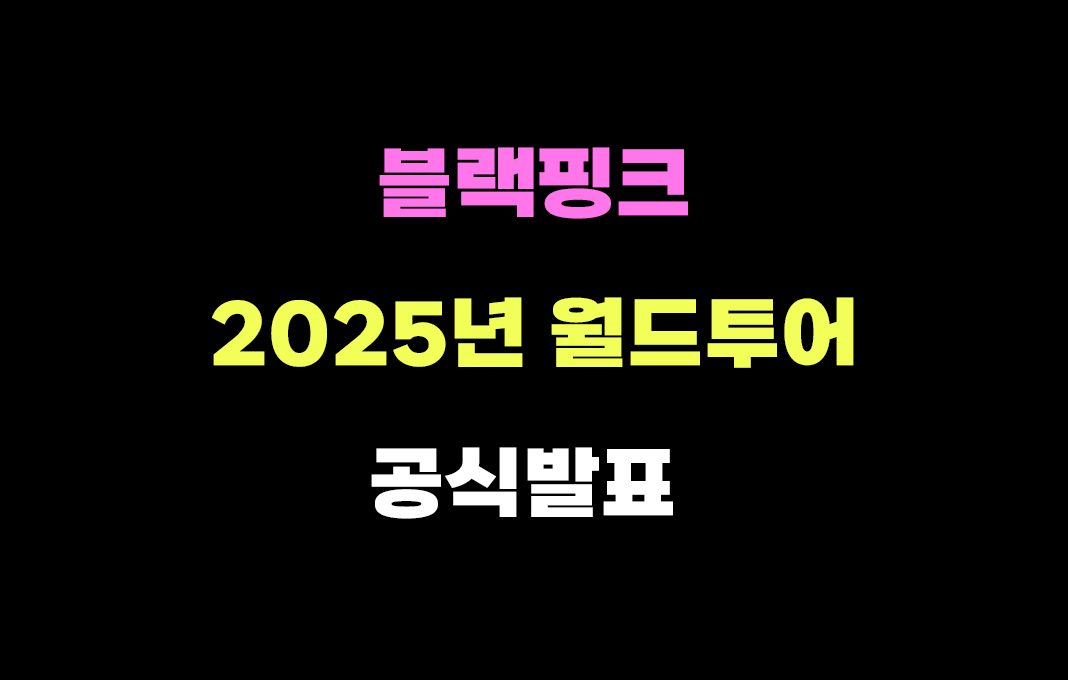
<style>
.page{position:relative;width:1068px;height:680px;background:#000000}
.page>*{position:absolute;margin:0}
.t1{font:80px/150px "SBAggroB";letter-spacing:0.005em;color:#f1ff58}
.t2{font:80px/150px "SBAggroB";letter-spacing:0.005em;color:#ff75ea}
.t3{font:80px/150px "SBAggroB";letter-spacing:0.005em;color:#ffffff}
</style>
<div class="page">
<p class="t1" style="left:212px;top:147px;width:642px;height:372px;text-align:center"><span class="t2">블랙핑크<br></span>2025년 월드투어<br><span class="t3">공식발표</span></p>
</div>
